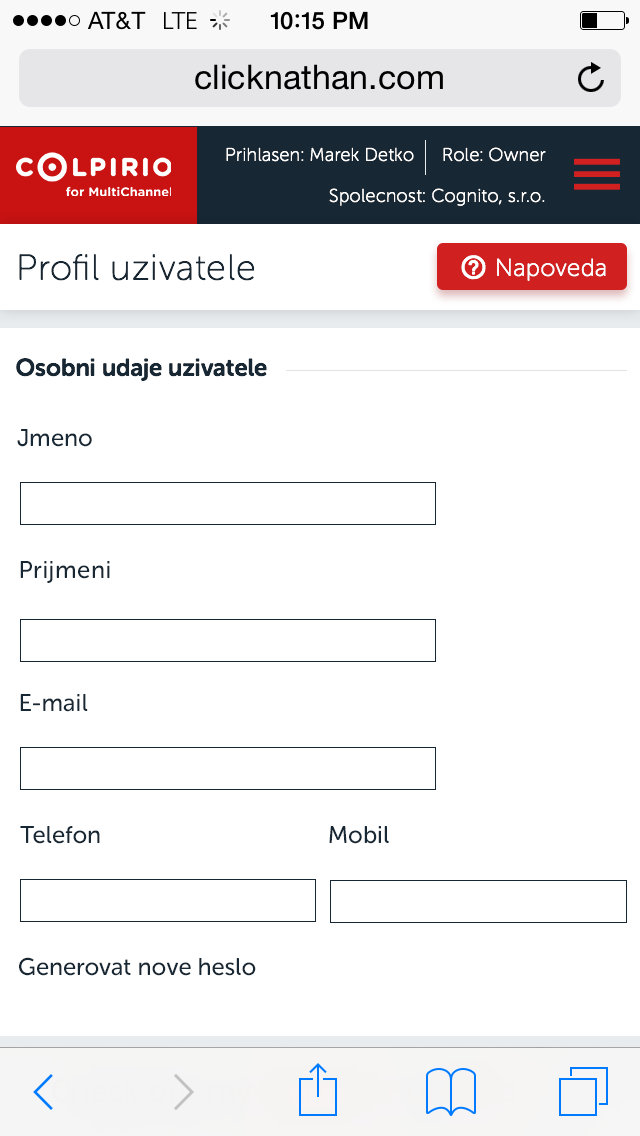
<style>
.page{position:relative;width:640px;height:1136px;background:#ffffff}
.page>*{position:absolute;margin:0}
.t1{font:18px "MuseoSansRounded-100";letter-spacing:0.025em;color:#ffffff}
.t2{font:36px "MuseoSansRounded-100";letter-spacing:0.025em;color:#172734}
.t3{font:24px "MuseoSansRounded-100";letter-spacing:0.025em;color:#ffffff}
.t4{font:24px "MuseoSansRounded-700";color:#172734}
.t5{font:24px "MuseoSansRounded-500";color:#172734}
.t6{font:24px "MuseoSansRounded-500";letter-spacing:0.025em;color:#172734}
</style>
<div class="page">
<p class="t1" style="left:226px;top:147px;width:188px;height:15px">Prihlasen: Marek Detko</p>
<p class="t1" style="left:443px;top:147px;width:103px;height:15px">Role: Owner</p>
<p class="t1" style="left:329px;top:188px;width:216px;height:18px">Spolecnost: Cognito, s.r.o.</p>
<p class="t2" style="left:19px;top:254px;width:236px;height:27px">Profil uzivatele</p>
<p class="t3" style="left:497px;top:258px;width:109px;height:23px">Napoveda</p>
<p class="t4" style="left:16px;top:358px;width:251px;height:23px">Osobni udaje uzivatele</p>
<p class="t5" style="left:17px;top:429px;width:75px;height:18px">Jmeno</p>
<p class="t6" style="left:20px;top:561px;width:90px;height:22px">Prijmeni</p>
<p class="t5" style="left:20px;top:694px;width:68px;height:18px">E-mail</p>
<p class="t5" style="left:20px;top:826px;width:80px;height:18px">Telefon</p>
<p class="t5" style="left:329px;top:826px;width:60px;height:18px">Mobil</p>
<p class="t5" style="left:19px;top:957px;width:237px;height:19px">Generovat nove heslo</p>
</div>
